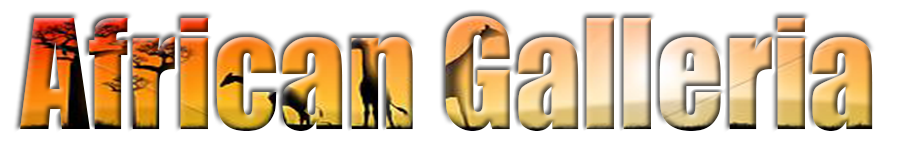
<style>
.page{position:relative;width:909px;height:160px;background:#ffffff}
.page>*{position:absolute;margin:0}
.t1{font:139.5px "Impact";scale:0.96 1}
</style>
<div class="page">
<p class="t1" style="left:20px;top:16px;width:853px;height:115px">African Galleria</p>
</div>
